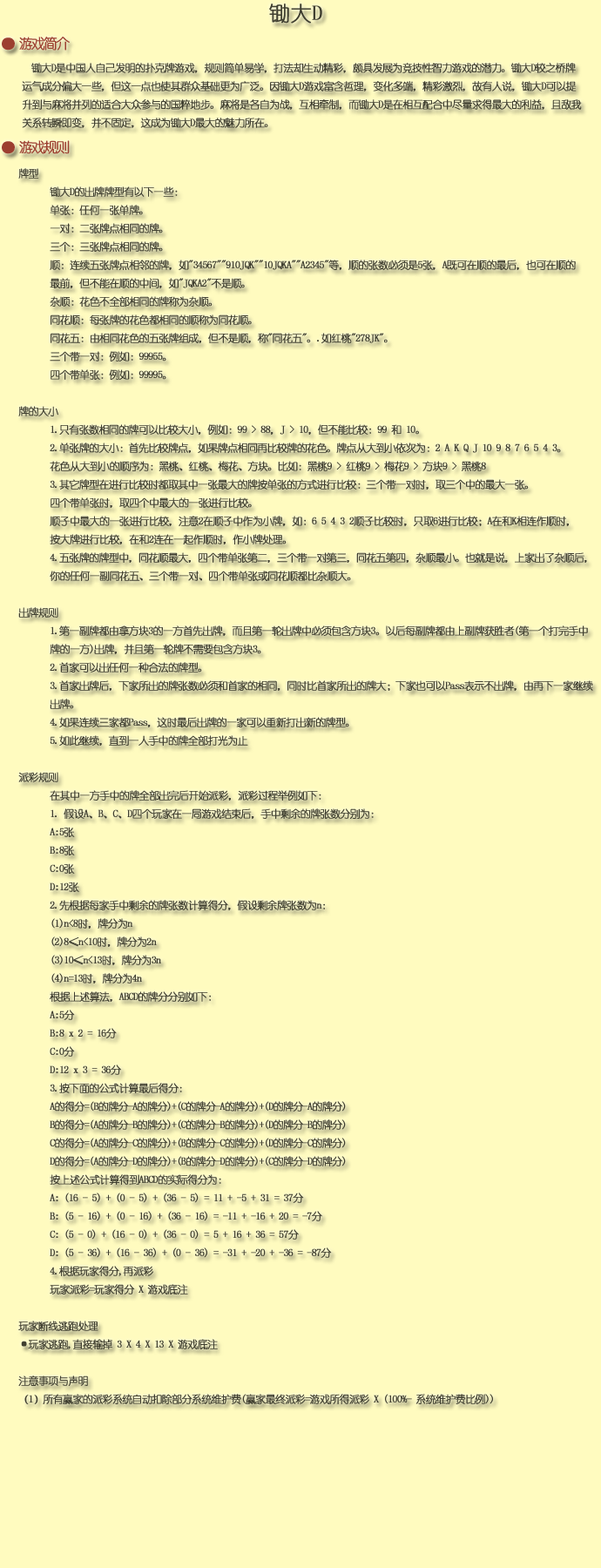
<style>
.page{position:relative;width:601px;height:1568px;background:#fffbbf}
.page>*{position:absolute;margin:0}
.t1{font:20.9px "YouYuan";color:#403f30;font-weight:bold}
.t2{font:13.9px "YouYuan";letter-spacing:-0.14em;color:#9c3f30;font-weight:bold}
.t3{font:10.5px "YouYuan";letter-spacing:-0.08em;color:#403f30;font-weight:bold}
</style>
<div class="page">
<p class="t1" style="left:269px;top:3px;width:53px;height:21px">锄大D</p>
<p class="t2" style="left:2px;top:37px;width:68px;height:14px">● 游戏简介</p>
<p class="t3" style="left:22px;top:63px;width:560px;height:65px">锄大D是中国人自己发明的扑克牌游戏，规则简单易学，打法却生动精彩，颇具发展为竞技性智力游戏的潜力。锄大D较之桥牌<br>运气成分偏大一些，但这一点也使其群众基础更为广泛。因锄大D游戏富含哲理，变化多端，精彩激烈，故有人说，锄大D可以提<br>升到与麻将并列的适合大众参与的国粹地步。麻将是各自为战，互相牵制，而锄大D是在相互配合中尽量求得最大的利益，且敌我<br>关系转瞬即变，并不固定，这成为锄大D最大的魅力所在。</p>
<p class="t2" style="left:2px;top:140px;width:68px;height:14px">● 游戏规则</p>
<p class="t3" style="left:18px;top:168px;width:575px;height:1236px">牌型<br> 锄大D的出牌牌型有以下一些：<br> 单张：任何一张单牌。<br> 一对：二张牌点相同的牌。<br> 三个：三张牌点相同的牌。<br> 顺：连续五张牌点相邻的牌，如"34567""910JQK""10JQKA""A2345"等，顺的张数必须是5张，A既可在顺的最后，也可在顺的<br> 最前，但不能在顺的中间，如"JQKA2"不是顺。<br> 杂顺：花色不全部相同的牌称为杂顺。<br> 同花顺：每张牌的花色都相同的顺称为同花顺。<br> 同花五：由相同花色的五张牌组成，但不是顺，称"同花五"。.如红桃"278JK"。<br> 三个带一对：例如：99955。<br> 四个带单张：例如：99995。 <br><br>牌的大小 <br> 1.只有张数相同的牌可以比较大小，例如：99 &gt; 88，J &gt; 10，但不能比较：99 和 10。<br> 2.单张牌的大小：首先比较牌点，如果牌点相同再比较牌的花色。牌点从大到小依次为：2 A K Q J 10 9 8 7 6 5 4 3。<br> 花色从大到小的顺序为：黑桃、红桃、梅花、方块。比如：黑桃9 &gt; 红桃9 &gt; 梅花9 &gt; 方块9 &gt; 黑桃8 <br> 3.其它牌型在进行比较时都取其中一张最大的牌按单张的方式进行比较：三个带一对时，取三个中的最大一张。<br> 四个带单张时，取四个中最大的一张进行比较。<br> 顺子中最大的一张进行比较，注意2在顺子中作为小牌，如：6 5 4 3 2顺子比较时，只取6进行比较；A在和K相连作顺时，<br> 按大牌进行比较，在和2连在一起作顺时，作小牌处理。<br> 4.五张牌的牌型中，同花顺最大，四个带单张第二，三个带一对第三，同花五第四，杂顺最小。也就是说，上家出了杂顺后，<br> 你的任何一副同花五、三个带一对、四个带单张或同花顺都比杂顺大。 <br><br>出牌规则<br> 1.第一副牌都由拿方块3的一方首先出牌，而且第一轮出牌中必须包含方块3。以后每副牌都由上副牌获胜者(第一个打完手中<br> 牌的一方)出牌，并且第一轮牌不需要包含方块3。<br> 2.首家可以出任何一种合法的牌型。<br> 3.首家出牌后，下家所出的牌张数必须和首家的相同，同时比首家所出的牌大；下家也可以Pass表示不出牌，由再下一家继续<br> 出牌。<br> 4.如果连续三家都Pass，这时最后出牌的一家可以重新打出新的牌型。 <br> 5.如此继续，直到一人手中的牌全部打光为止 <br><br>派彩规则 <br> 在其中一方手中的牌全部出完后开始派彩，派彩过程举例如下： <br> 1. 假设A、B、C、D四个玩家在一局游戏结束后，手中剩余的牌张数分别为：<br> A:5张<br> B:8张<br> C:0张<br> D:12张<br> 2.先根据每家手中剩余的牌张数计算得分，假设剩余牌张数为n：<br> (1)n&lt;8时，牌分为n<br> (2)8≤n&lt;10时，牌分为2n <br> (3)10≤n&lt;13时，牌分为3n<br> (4)n=13时，牌分为4n<br> 根据上述算法，ABCD的牌分分别如下：<br> A:5分<br> B:8 x 2 = 16分<br> C:0分<br> D:12 x 3 = 36分<br> 3.按下面的公式计算最后得分：<br> A的得分=(B的牌分-A的牌分)+(C的牌分-A的牌分)+(D的牌分-A的牌分)<br> B的得分=(A的牌分-B的牌分)+(C的牌分-B的牌分)+(D的牌分-B的牌分)<br> C的得分=(A的牌分-C的牌分)+(B的牌分-C的牌分)+(D的牌分-C的牌分)<br> D的得分=(A的牌分-D的牌分)+(B的牌分-D的牌分)+(C的牌分-D的牌分)<br> 按上述公式计算得到ABCD的实际得分为：<br> A: (16 - 5) + (0 - 5) + (36 - 5) = 11 + -5 + 31 = 37分<br> B: (5 - 16) + (0 - 16) + (36 - 16) = -11 + -16 + 20 = -7分 <br> C: (5 - 0) + (16 - 0) + (36 - 0) = 5 + 16 + 36 = 57分<br> D: (5 - 36) + (16 - 36) + (0 - 36) = -31 + -20 + -36 = -87分<br> 4.根据玩家得分,再派彩<br> 玩家派彩=玩家得分 X 游戏底注<br><br>玩家断线逃跑处理<br>·玩家逃跑,直接输掉 3 X 4 X 13 X 游戏底注<br><br>注意事项与声明<br>（1）所有赢家的派彩系统自动扣除部分系统维护费(赢家最终派彩=游戏所得派彩 X (100%- 系统维护费比例))</p>
</div>
